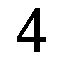
<style>
.page{position:relative;width:64px;height:64px;background:#ffffff}
.page>*{position:absolute;margin:0}
.t1{font:60px "MicrosoftSansSerif";color:#000000}
</style>
<div class="page">
<p class="t1" style="left:17px;top:8px;width:29px;height:44px">4</p>
</div>
